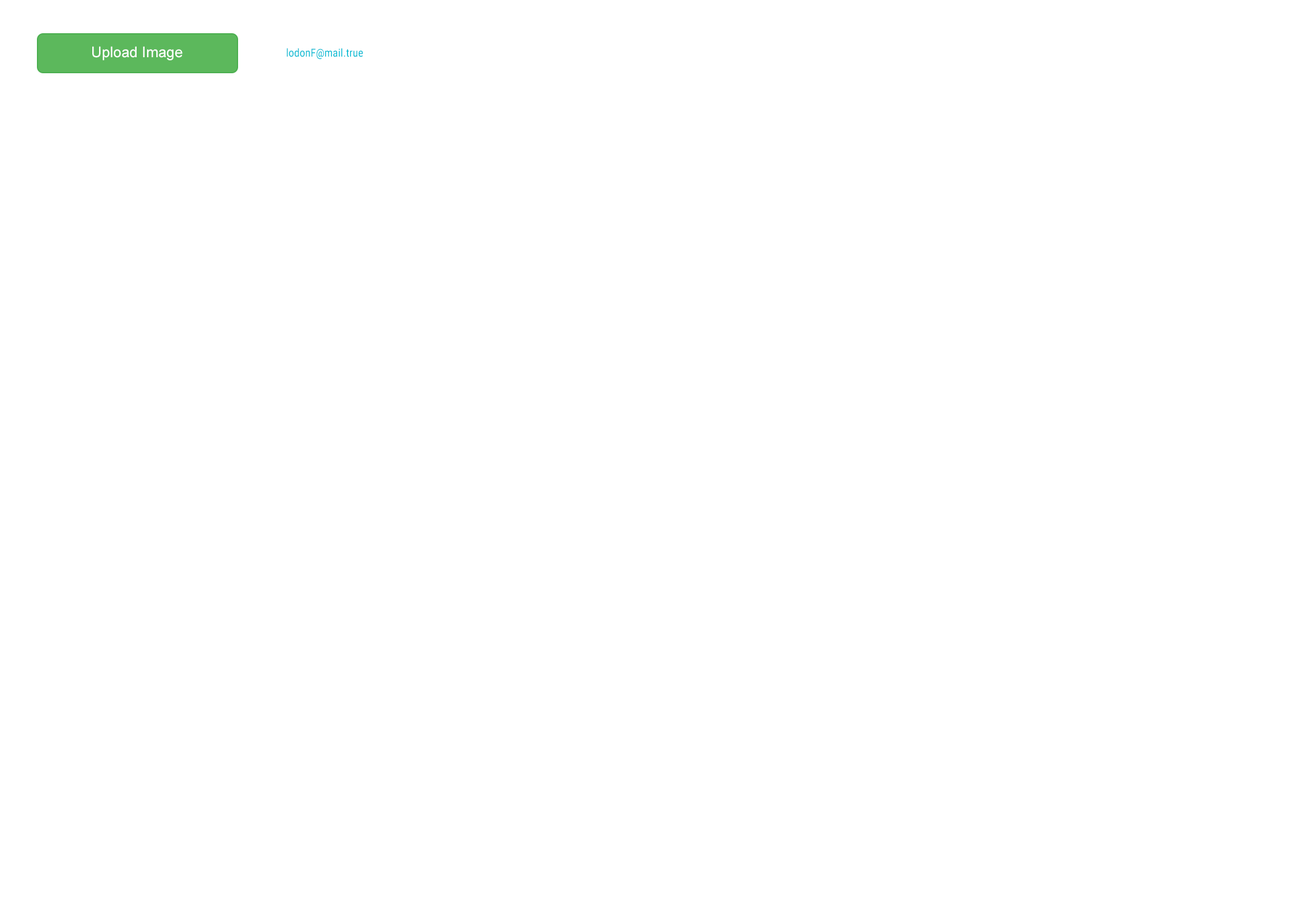
<style>
.page{position:relative;width:1292px;height:923px;background:#ffffff}
.page>*{position:absolute;margin:0}
.t1{font:14.8px "ArialMT";color:#ffffff}
.t2{font:11.1px "RobotoCondensed-Regular";color:#00bcd4}
</style>
<div class="page">
<p class="t1" style="left:92px;top:46px;width:91px;height:14px">Upload Image</p>
<p class="t2" style="left:287px;top:48px;width:76px;height:11px">lodonF@mail.true</p>
</div>
